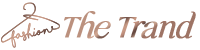
<style>
.page{position:relative;width:200px;height:50px;background:#ffffff}
.page>*{position:absolute;margin:0}
.t1{font:29.2px "NelphimItalic-Italic";letter-spacing:-0.05em;font-weight:bold}
</style>
<div class="page">
<p class="t1" style="left:64px;top:11px;width:132px;height:28px">The Trand</p>
</div>
